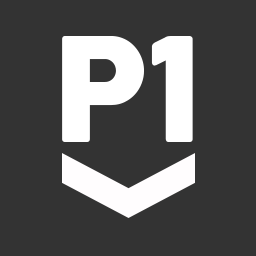
<style>
.page{position:relative;width:256px;height:256px;background:#333333}
.page>*{position:absolute;margin:0}
.t1{font:142.8px "COCOGOOSE";color:#ffffff}
</style>
<div class="page">
<p class="t1" style="left:62px;top:36px;width:131px;height:106px">P1</p>
</div>
